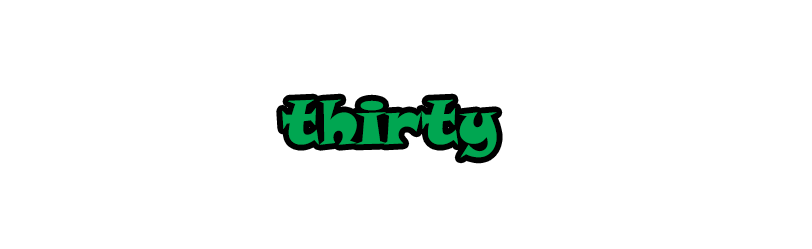
<style>
.page{position:relative;width:812px;height:249px;background:#ffffff}
.page>*{position:absolute;margin:0}
.t1{font:60px "SnapITC-Regular";color:#00a651}
</style>
<div class="page">
<p class="t1" style="left:282px;top:99px;width:215px;height:59px">thirty</p>
</div>
